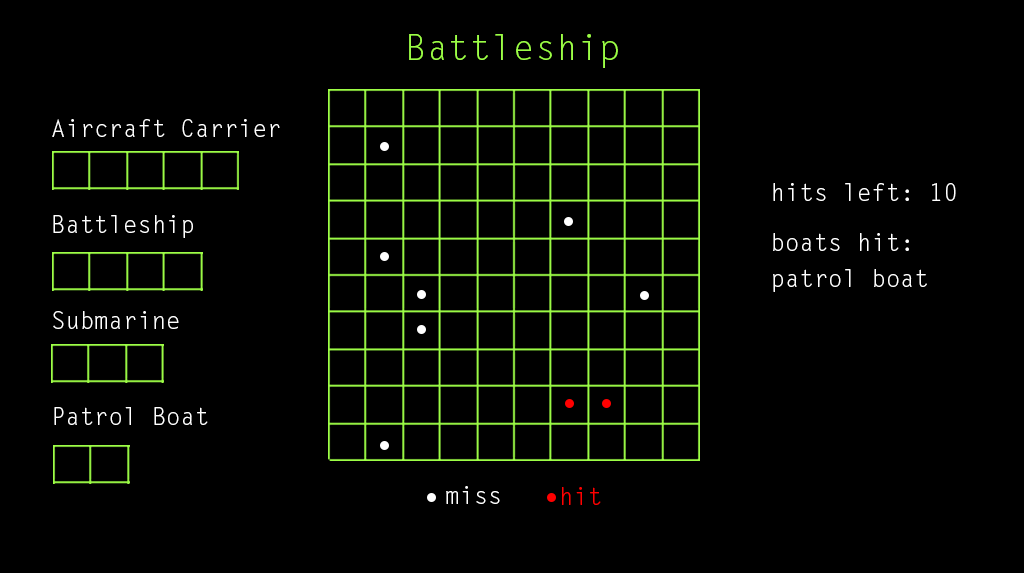
<style>
.page{position:relative;width:1024px;height:573px;background:#000000}
.page>*{position:absolute;margin:0}
.t1{font:35.7px "LetterGothicStd";color:#9cfe46}
.t2{font:24px/48px "LetterGothicStd";color:#ffffff}
.t3{font:24px "LetterGothicStd";color:#ffffff}
.t4{font:24px/36px "LetterGothicStd";color:#ffffff}
.t5{font:24px "LetterGothicStd";color:#ff0000}
</style>
<div class="page">
<p class="t1" style="left:409px;top:34px;width:209px;height:34px">Battleship</p>
<p class="t2" style="left:52px;top:119px;width:228px;height:306px">Aircraft Carrier<br><br>Battleship<br><br>Submarine<br><br>Patrol Boat</p>
<p class="t3" style="left:773px;top:183px;width:183px;height:18px">hits left: 10</p>
<p class="t4" style="left:773px;top:233px;width:154px;height:59px">boats hit:<br>patrol boat</p>
<p class="t3" style="left:446px;top:486px;width:54px;height:18px">miss</p>
<p class="t5" style="left:562px;top:487px;width:39px;height:18px">hit</p>
</div>
